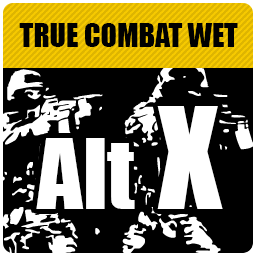
<style>
.page{position:relative;width:256px;height:256px;background:#000000}
.page>*{position:absolute;margin:0}
.t1{font:30px "Impact";color:#000000}
.t2{font:90px "Impact";color:#ffffff}
.t3{font:130px "Impact";color:#ffffff}
</style>
<div class="page">
<p class="t1" style="left:19px;top:23px;width:219px;height:24px">TRUE COMBAT WET</p>
<p class="t2" style="left:36px;top:106px;width:187px;height:103px">Alt<span class="t3"> X</span></p>
</div>
